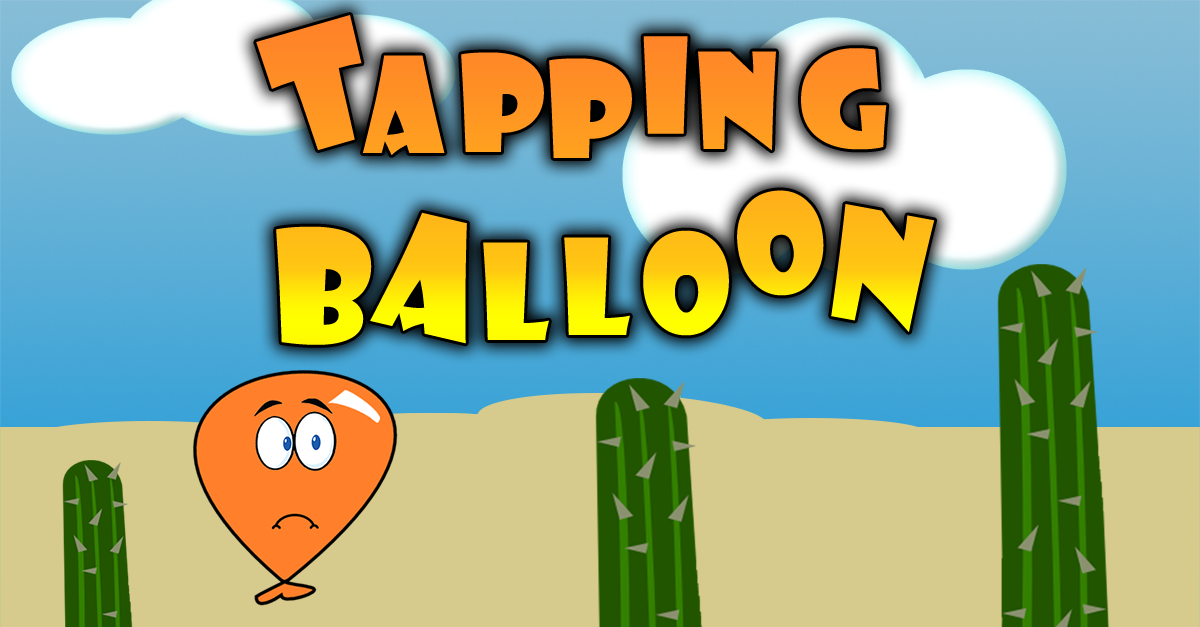
<style>
.page{position:relative;width:1200px;height:627px;background:#d6cb8c}
.page>*{position:absolute;margin:0}
.t1{font:160.7px "ShowcardGothic-Reg";color:#ff8b26}
.t2{font:129.9px "ShowcardGothic-Reg";color:#ff8e25}
.t3{font:130px "ShowcardGothic-Reg";color:#ff9124}
.t4{font:130px "ShowcardGothic-Reg";color:#ff9224}
.t5{font:130px "ShowcardGothic-Reg";color:#ff9523}
.t6{font:130px "ShowcardGothic-Reg";color:#ff9324}
.t7{font:130px "ShowcardGothic-Reg";color:#ffbd16}
.t8{font:150.3px "ShowcardGothic-Reg";color:#ffc413}
.t9{font:156px "ShowcardGothic-Reg"}
.t10{font:150px "ShowcardGothic-Reg"}
.t11{font:130px "ShowcardGothic-Reg"}
</style>
<div class="page">
<p class="t1" style="left:256px;top:15px;width:106px;height:135px;rotate:-16deg">T</p>
<p class="t2" style="left:643px;top:36px;width:45px;height:98px">i</p>
<p class="t3" style="left:461px;top:52px;width:83px;height:100px">p</p>
<p class="t3" style="left:698px;top:51px;width:78px;height:100px">n</p>
<p class="t4" style="left:801px;top:48px;width:86px;height:102px">g</p>
<p class="t5" style="left:363px;top:55px;width:82px;height:100px">a</p>
<p class="t6" style="left:549px;top:58px;width:83px;height:100px">p</p>
<p class="t7" style="left:737px;top:190px;width:87px;height:106px;rotate:-6deg">o</p>
<p class="t8" style="left:831px;top:204px;width:104px;height:128px;rotate:10deg">n</p>
<p class="t9" style="left:370px;top:212px;width:97px;height:132px;rotate:13deg">a</p>
<p class="t10" style="left:276px;top:226px;width:96px;height:119px">b</p>
<p class="t11" style="left:643px;top:230px;width:86px;height:106px">o</p>
<p class="t11" style="left:483px;top:242px;width:66px;height:98px">l</p>
<p class="t11" style="left:564px;top:237px;width:66px;height:98px">l</p>
</div>
